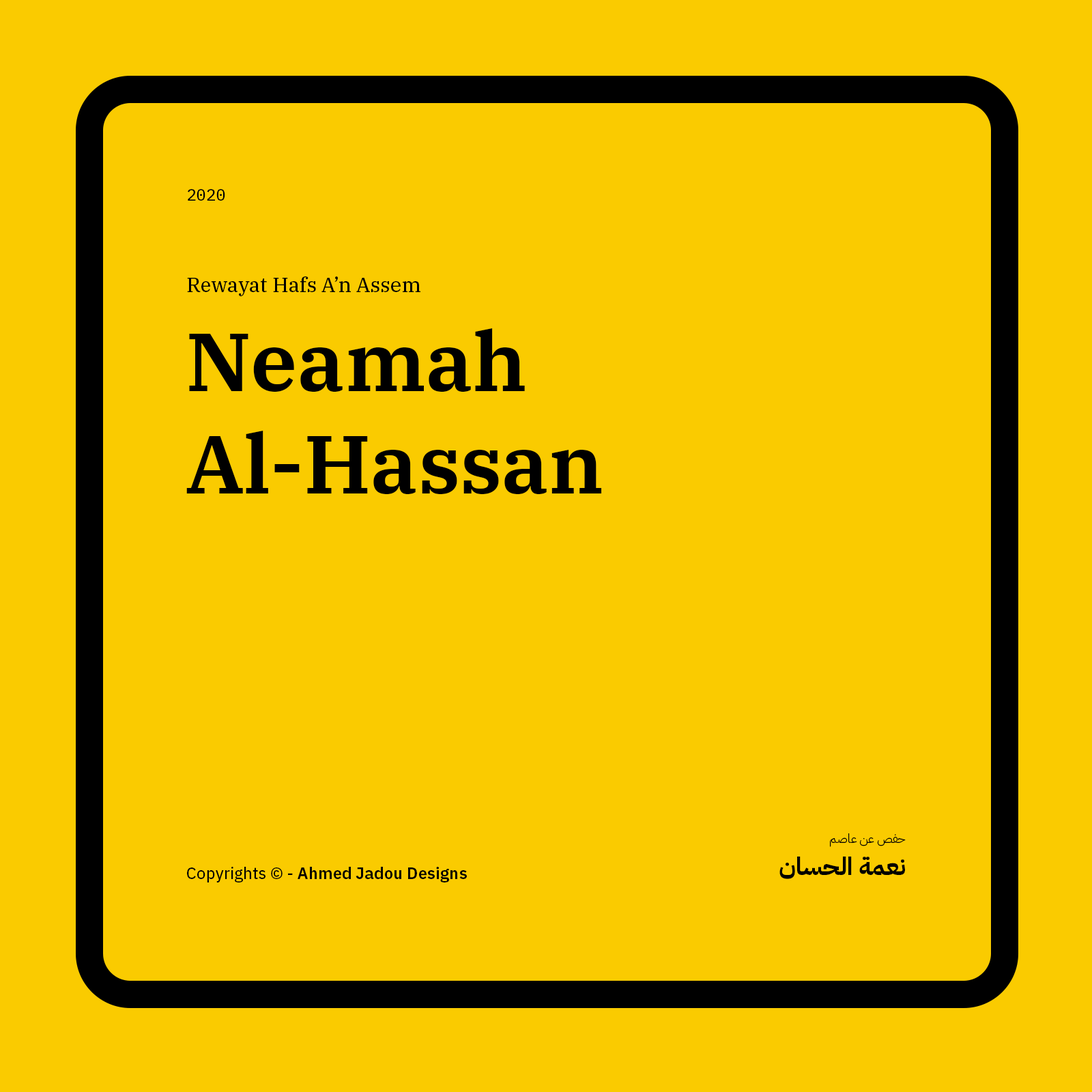
<style>
.page{position:relative;width:1092px;height:1092px;background:#facb00}
.page>*{position:absolute;margin:0}
.t1{font:16.4px "IBMPlexMono-Text";color:#000000}
.t2{font:20.5px "IBMPlexSerif-Text";color:#000000}
.t3{font:81.9px/102.7px "IBMPlexSerif-SemiBold";color:#000000}
.t4{font:12.3px "IBMPlexArabic-Light";color:#000000}
.t5{font:24.6px "IBMPlexArabic-Bold";color:#000000}
.t6{font:16.4px "IBMPlexSans-SemiBold";color:#000000}
.t7{font:16.4px "IBMPlexSans-Text";color:#000000}
</style>
<div class="page">
<p class="t1" style="left:188px;top:189px;width:37px;height:12px">2020</p>
<p class="t2" style="left:187px;top:276px;width:233px;height:20px">Rewayat Hafs A’n Assem</p>
<p class="t3" style="left:186px;top:328px;width:416px;height:166px">Neamah Al-Hassan</p>
<p class="t4" style="left:830px;top:833px;width:76px;height:14px">حفص عن عاصم</p>
<p class="t5" style="left:779px;top:857px;width:126px;height:22px">نعمة الحسان</p>
<p class="t6" style="left:187px;top:867px;width:280px;height:15px"><span class="t7">Copyrights © - </span>Ahmed Jadou Designs</p>
</div>
